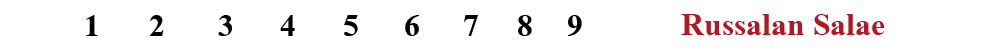
<style>
.page{position:relative;width:1000px;height:50px;background:#ffffff}
.page>*{position:absolute;margin:0}
.t1{font:48px "AngsanaNew-Bold";color:#000000}
.t2{font:48px "AngsanaNew-Bold";color:#b31624}
</style>
<div class="page">
<p class="t1" style="left:86px;top:15px;width:12px;height:21px">1</p>
<p class="t1" style="left:149px;top:15px;width:15px;height:21px">2</p>
<p class="t1" style="left:218px;top:15px;width:14px;height:21px">3</p>
<p class="t1" style="left:280px;top:15px;width:15px;height:21px">4</p>
<p class="t1" style="left:344px;top:15px;width:14px;height:21px">5</p>
<p class="t1" style="left:405px;top:15px;width:14px;height:21px">6</p>
<p class="t1" style="left:464px;top:15px;width:14px;height:21px">7</p>
<p class="t1" style="left:518px;top:15px;width:14px;height:21px">8</p>
<p class="t1" style="left:568px;top:15px;width:14px;height:21px">9</p>
<p class="t2" style="left:681px;top:14px;width:204px;height:21px">Russalan Salae</p>
</div>
